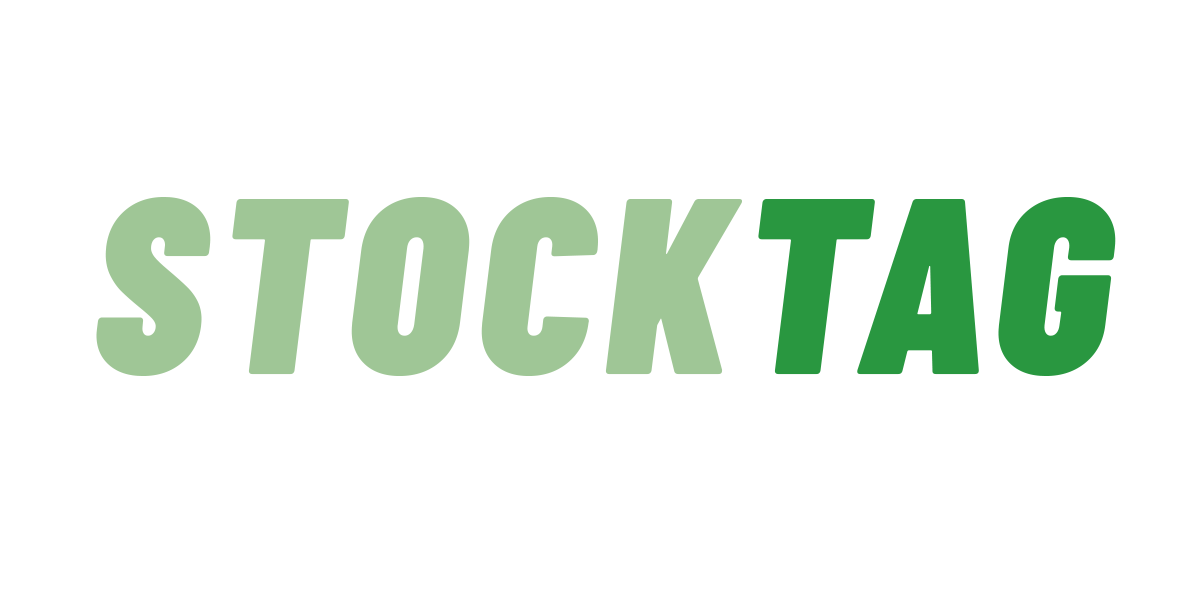
<style>
.page{position:relative;width:1200px;height:600px;background:#ffffff}
.page>*{position:absolute;margin:0}
.t1{font:250px "BarlowCondensed-BlackItalic";letter-spacing:0.05em;color:#9fc696}
.t2{font:250px "BarlowCondensed-BlackItalic";letter-spacing:0.05em;color:#299740}
</style>
<div class="page">
<p class="t1" style="left:96px;top:197px;width:1020px;height:179px">STOCK<span class="t2">TAG</span></p>
</div>
